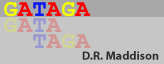
<style>
.page{position:relative;width:164px;height:64px;background:#c6c6c6}
.page>*{position:absolute;margin:0}
.t1{font:24px "CourierNewPS-BoldMT";color:#f6ff00}
.t2{font:24px "CourierNewPS-BoldMT";color:#fa0000}
.t3{font:24px "CourierNewPS-BoldMT";color:#0b16f3}
.t4{font:24px "CourierNewPS-BoldMT"}
.t5{font:12px "MyriadPro-Bold";color:#2d2d2d}
</style>
<div class="page">
<p class="t1" style="left:4px;top:2px;width:87px;height:15px">G<span class="t2">A</span><span class="t3">T</span><span class="t2">A</span>G<span class="t2">A</span></p>
<p class="t4" style="left:4px;top:18px;width:58px;height:15px">GATA</p>
<p class="t4" style="left:33px;top:34px;width:58px;height:15px">TAGA</p>
<p class="t5" style="left:82px;top:51px;width:77px;height:9px">D.R. Maddison</p>
</div>
